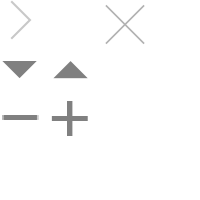
<style>
.page{position:relative;width:200px;height:200px;background:#ffffff}
.page>*{position:absolute;margin:0}
.t1{font:71.8px "MicrosoftYaHei";letter-spacing:0.1em;color:#808080}
</style>
<div class="page">
<p class="t1" style="left:51px;top:101px;width:37px;height:35px">+</p>
</div>
